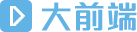
<style>
.page{position:relative;width:137px;height:32px;background:#ffffff}
.page>*{position:absolute;margin:0}
.t1{font:32px "»X?¬Õ´IÊ^";letter-spacing:0.025em;color:#61b3e6}
</style>
<div class="page">
<p class="t1" style="left:41px;top:2px;width:96px;height:29px">大前端</p>
</div>
